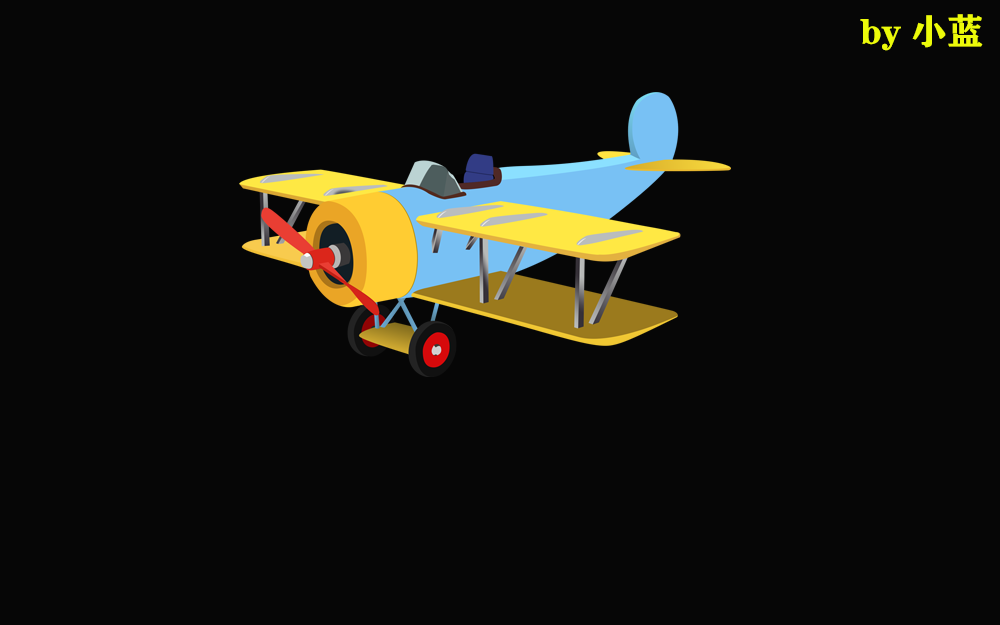
<style>
.page{position:relative;width:1000px;height:625px;background:#060606}
.page>*{position:absolute;margin:0}
.t1{font:36px "FZCHSJW--GB1-0";color:#ecfa0a}
</style>
<div class="page">
<p class="t1" style="left:860px;top:14px;width:123px;height:37px">by 小蓝</p>
</div>
